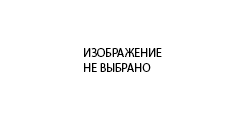
<style>
.page{position:relative;width:246px;height:130px;background:#ffffff}
.page>*{position:absolute;margin:0}
.t1{font:12px "MyriadPro-Regular";color:#000000}
</style>
<div class="page">
<p class="t1" style="left:84px;top:48px;width:78px;height:24px">ИЗОБРАЖЕНИЕ<br>НЕ ВЫБРАНО</p>
</div>
